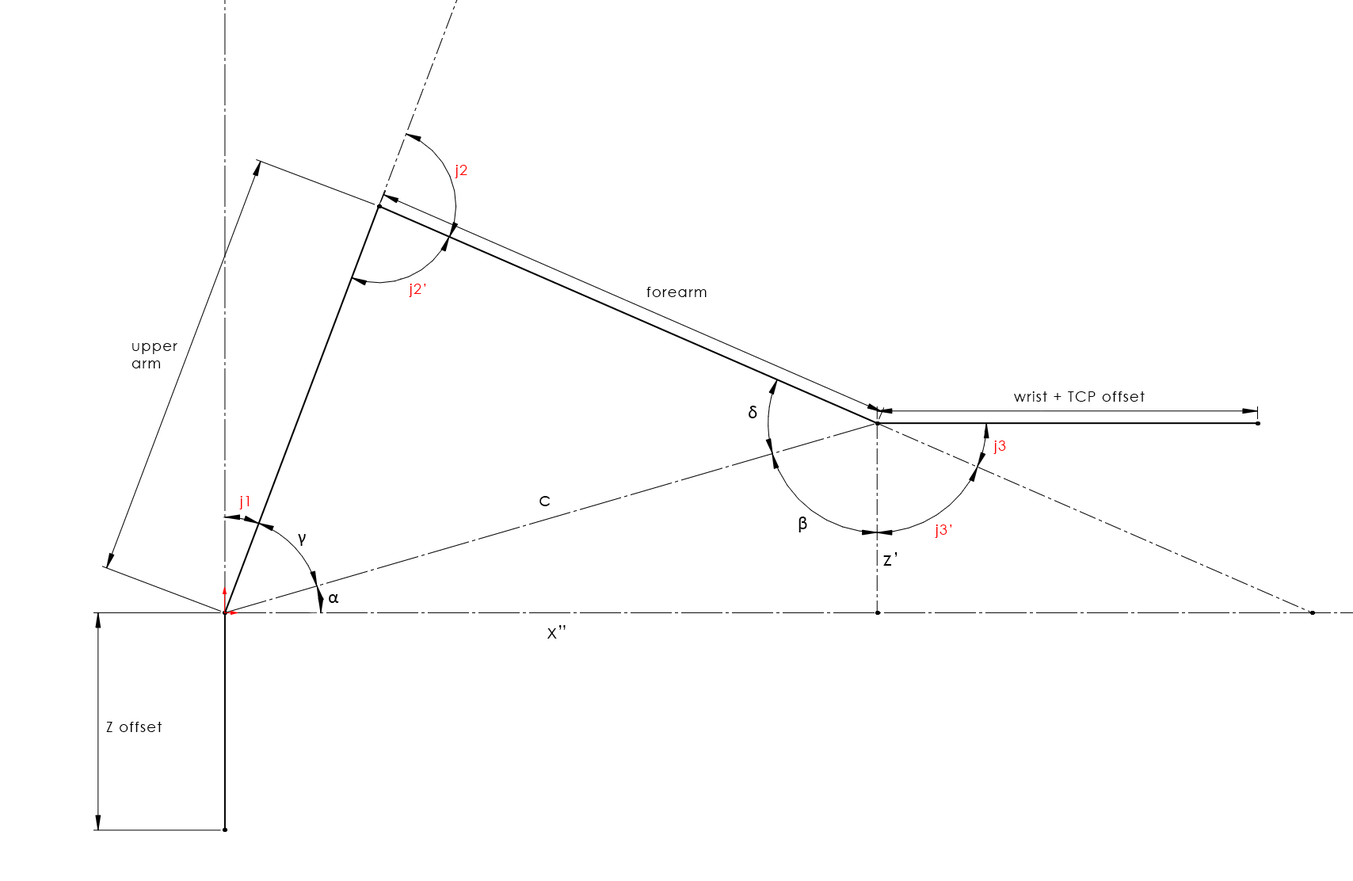
<style>
.page{position:relative;width:1353px;height:881px;background:#ffffff}
.page>*{position:absolute;margin:0}
.t1{font:14.3px "CenturyGothic";letter-spacing:0.07em;color:#ff0000}
.t2{font:14.3px "CenturyGothic";letter-spacing:0.07em;color:#000000}
.t3{font:19px "Calibri";letter-spacing:0.07em;color:#000000}
.t4{font:19px "CenturyGothic";letter-spacing:0.07em;color:#000000}
</style>
<div class="page">
<p class="t1" style="left:455px;top:165px;width:12px;height:13px">j2</p>
<p class="t1" style="left:409px;top:284px;width:17px;height:13px">j2’</p>
<p class="t2" style="left:647px;top:287px;width:60px;height:10px">forearm</p>
<p class="t2" style="left:132px;top:343px;width:45px;height:25px">upper<br>arm</p>
<p class="t2" style="left:1014px;top:391px;width:131px;height:11px">wrist + TCP offset</p>
<p class="t3" style="left:749px;top:406px;width:8px;height:12px">δ</p>
<p class="t1" style="left:994px;top:441px;width:12px;height:13px">j3</p>
<p class="t1" style="left:239px;top:496px;width:10px;height:13px">j1</p>
<p class="t4" style="left:540px;top:496px;width:11px;height:10px">c</p>
<p class="t3" style="left:799px;top:517px;width:8px;height:15px">β</p>
<p class="t1" style="left:935px;top:525px;width:17px;height:13px">j3’</p>
<p class="t3" style="left:298px;top:534px;width:8px;height:12px">γ</p>
<p class="t4" style="left:883px;top:552px;width:15px;height:14px">z’</p>
<p class="t3" style="left:329px;top:594px;width:10px;height:9px">α</p>
<p class="t4" style="left:548px;top:625px;width:18px;height:14px">x”</p>
<p class="t2" style="left:106px;top:722px;width:56px;height:10px">Z offset</p>
</div>
